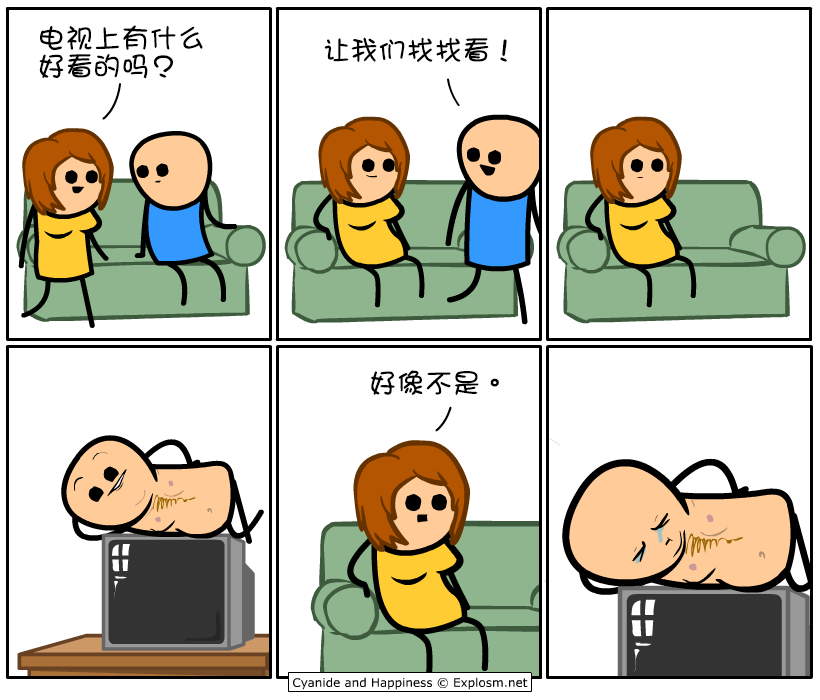
<style>
.page{position:relative;width:820px;height:700px;background:#ffffff}
.page>*{position:absolute;margin:0}
.t1{font:28px/28px "DFGirl";color:#000000}
.t2{font:28px "DFGirl";color:#000000}
</style>
<div class="page">
<p class="t1" style="left:39px;top:25px;width:164px;height:54px">电视上有什么<br>好看的吗？</p>
<p class="t2" style="left:324px;top:37px;width:183px;height:25px">让我们找找看！</p>
<p class="t2" style="left:370px;top:370px;width:129px;height:25px">好像不是。</p>
</div>
